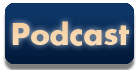
<style>
.page{position:relative;width:140px;height:70px}
.page>*{position:absolute;margin:0}
.t1{font:29.2px "Futura-Bold";color:#f7d6ad}
</style>
<div class="page">
<p class="t1" style="left:12px;top:21px;width:117px;height:25px">Podcast</p>
</div>
